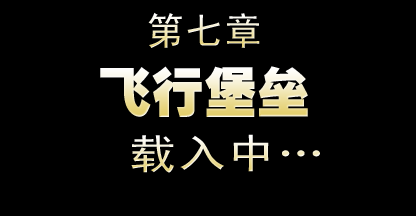
<style>
.page{position:relative;width:416px;height:216px;background:#000000}
.page>*{position:absolute;margin:0}
.t1{font:38px "SimHei";letter-spacing:0.03em;text-transform:uppercase}
.t2{font:53px "HeitiEG-Ultra-GB";text-transform:uppercase}
.t3{font:40.9px "SimHei";letter-spacing:0.03em;scale:1.18 1}
</style>
<div class="page">
<p class="t1" style="left:148px;top:12px;width:112px;height:36px">第七章</p>
<p class="t2" style="left:100px;top:66px;width:208px;height:51px">飞行堡垒</p>
<p class="t3" style="left:131px;top:134px;width:189px;height:39px">载入中…</p>
</div>
